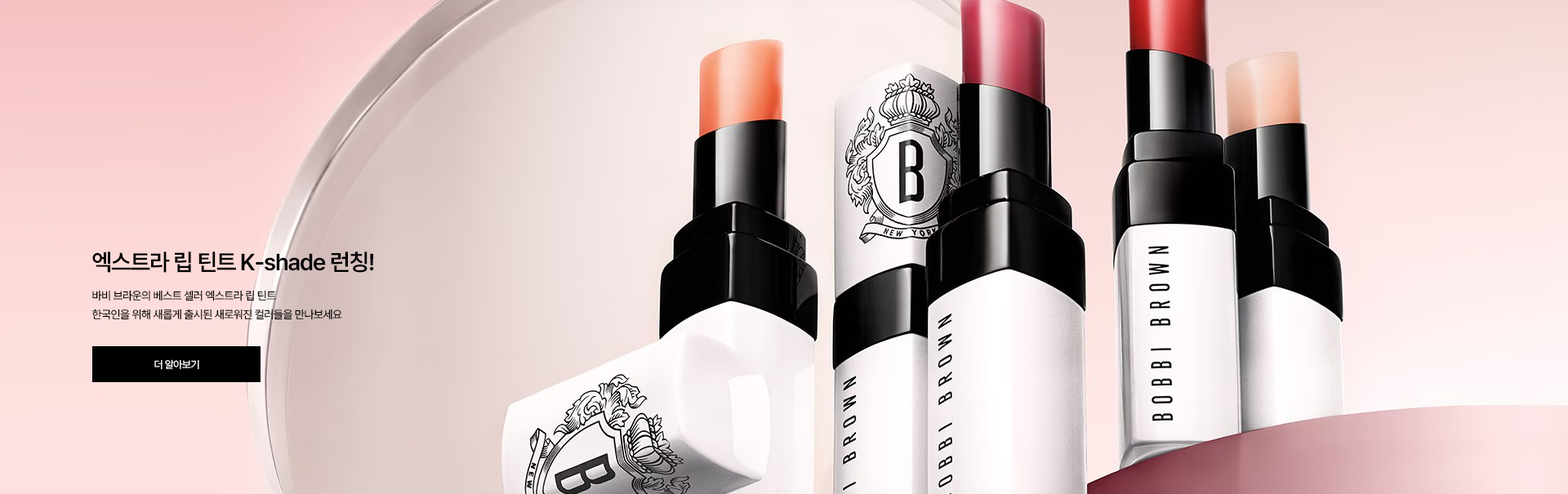
<style>
.page{position:relative;width:1568px;height:494px}
.page>*{position:absolute;margin:0}
.t1{font:40px "Pretendard-SemiBold";letter-spacing:-0.04em;color:#000000}
.t2{font:19.6px/18.8px "Pretendard-Regular";letter-spacing:-0.04em;color:#000000}
.t3{font:18px "Pretendard-Regular";letter-spacing:-0.04em;color:#ffffff}
</style>
<div class="page">
<p class="t1" style="left:92px;top:252px;width:282px;height:21px">엑스트라 립 틴트 K-shade 런칭!</p>
<p class="t2" style="left:91px;top:290px;width:251px;height:30px">바비 브라운의 베스트 셀러 엑스트라 립 틴트<br>한국인을 위해 새롭게 출시된 새로워진 컬러들을 만나보세요</p>
<p class="t3" style="left:154px;top:359px;width:45px;height:11px">더 알아보기</p>
</div>
